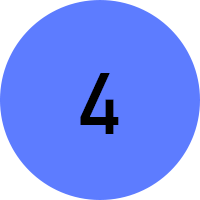
<style>
.page{position:relative;width:200px;height:200px;background:#5d7cff}
.page>*{position:absolute;margin:0}
.t1{font:85px "DINAlternate-Bold";color:#000000}
</style>
<div class="page">
<p class="t1" style="left:80px;top:73px;width:39px;height:61px">4</p>
</div>
